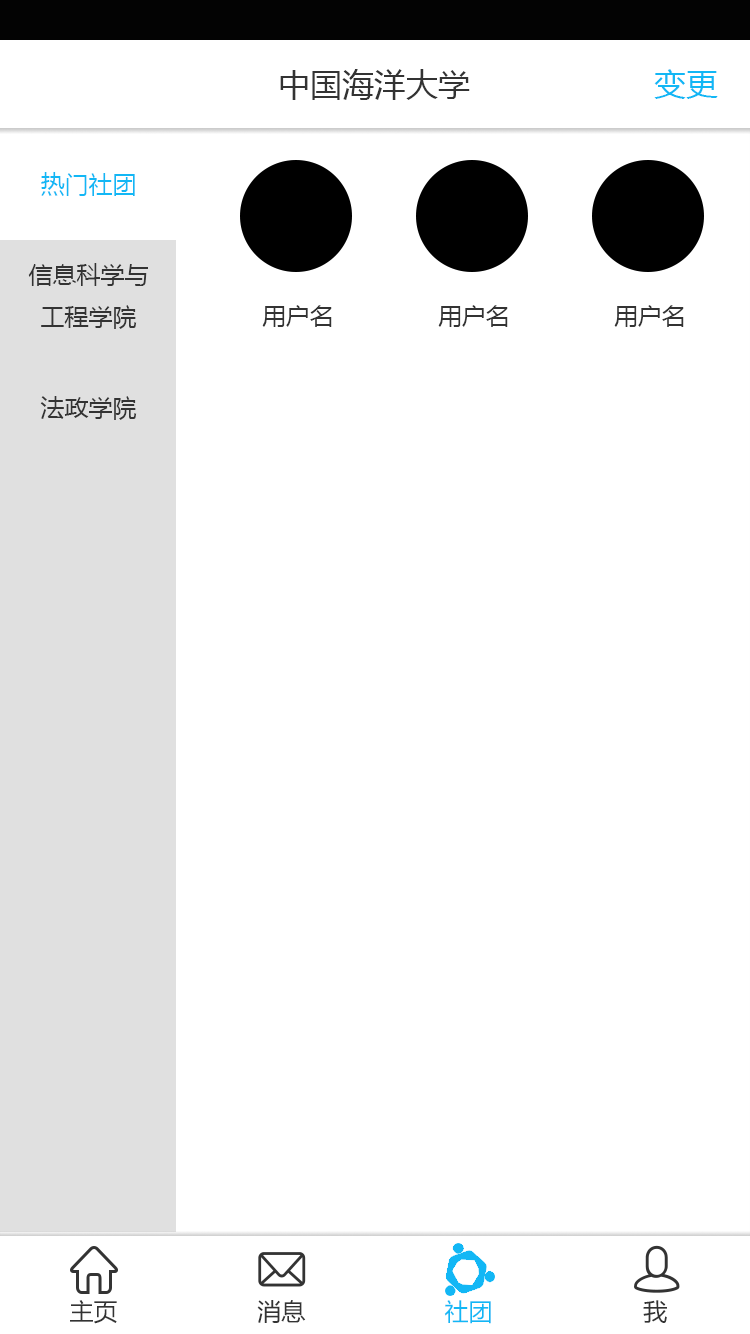
<style>
.page{position:relative;width:750px;height:1334px;background:#ffffff}
.page>*{position:absolute;margin:0}
.t1{font:32px "MicrosoftYaHei";color:#333333}
.t2{font:32px "MicrosoftYaHei";color:#12b7f5}
.t3{font:24px "MicrosoftYaHei";color:#12b7f5}
.t4{font:24px "MicrosoftYaHei";color:#333333}
</style>
<div class="page">
<p class="t1" style="left:280px;top:69px;width:190px;height:31px">中国海洋大学</p>
<p class="t2" style="left:654px;top:69px;width:64px;height:30px">变更</p>
<p class="t3" style="left:41px;top:172px;width:94px;height:24px">热门社团</p>
<p class="t4" style="left:28px;top:263px;width:120px;height:66px;text-align:center">信息科学与<br>工程学院</p>
<p class="t4" style="left:262px;top:305px;width:70px;height:22px">用户名</p>
<p class="t4" style="left:438px;top:305px;width:70px;height:22px">用户名</p>
<p class="t4" style="left:614px;top:305px;width:70px;height:22px">用户名</p>
<p class="t4" style="left:40px;top:396px;width:97px;height:24px">法政学院</p>
<p class="t4" style="left:70px;top:1300px;width:47px;height:24px">主页</p>
<p class="t4" style="left:257px;top:1300px;width:49px;height:23px">消息</p>
<p class="t3" style="left:444px;top:1300px;width:47px;height:24px">社团</p>
<p class="t4" style="left:643px;top:1300px;width:24px;height:23px">我</p>
</div>
